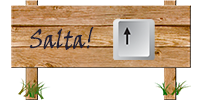
<style>
.page{position:relative;width:200px;height:100px;background:#ffffff}
.page>*{position:absolute;margin:0}
.t1{font:25.6px "VinerHandITC";color:#222034;scale:0.78 1}
</style>
<div class="page">
<p class="t1" style="left:29px;top:26px;width:65px;height:24px">Salta!</p>
</div>
